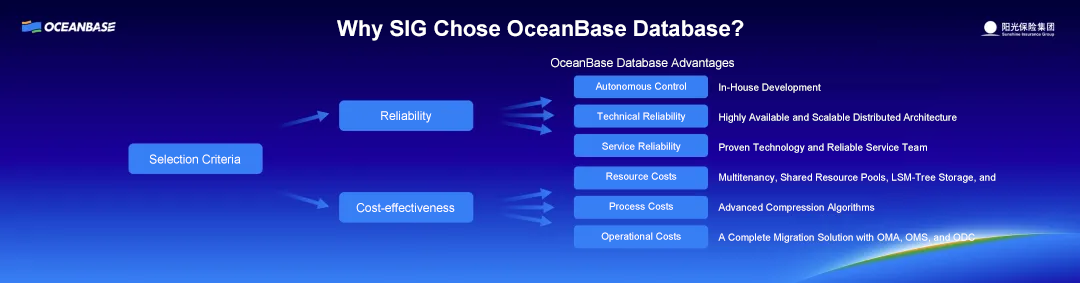
<style>
.page{position:relative;width:1080px;height:283px}
.page>*{position:absolute;margin:0}
.t1{font:22px "Arial-BoldMT";color:#ffffff}
.t2{font:12px "ArialMT";color:#ffffff}
.t3{font:10px/30px "ArialMT";color:#ffffff}
</style>
<div class="page">
<p class="t1" style="left:337px;top:20px;width:407px;height:21px">Why SIG Chose OceanBase Database?</p>
<p class="t2" style="left:551px;top:58px;width:183px;height:12px">OceanBase Database Advantages</p>
<p class="t3" style="left:595px;top:82px;width:91px;height:160px;text-align:center">Autonomous Control<br>Technical Reliability<br>Service Reliability<br>Resource Costs<br>Process Costs<br>Operational Costs</p>
<p class="t3" style="left:718px;top:83px;width:278px;height:160px">In-House Development<br>Highly Available and Scalable Distributed Architecture<br>Proven Technology and Reliable Service Team<br>Multitenancy, Shared Resource Pools, LSM-Tree Storage, and Advanced Compression Algorithms<br>A Complete Migration Solution with OMA, OMS, and ODC<br>A Complete Business Management System with OCP, OAS, and OAT</p>
<p class="t2" style="left:381px;top:111px;width:51px;height:12px">Reliability</p>
<p class="t2" style="left:149px;top:154px;width:92px;height:10px">Selection Criteria</p>
<p class="t2" style="left:356px;top:203px;width:99px;height:10px">Cost-effectiveness</p>
</div>
